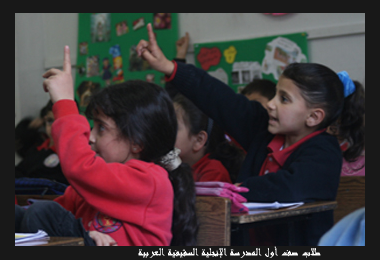
<style>
.page{position:relative;width:380px;height:260px}
.page>*{position:absolute;margin:0}
.t1{font:12px "Andalus";color:#ffffff}
</style>
<div class="page">
<p class="t1" style="left:138px;top:246px;width:183px;height:12px">طلاب صف أول المدرسة الإنجلية السقيفية العربية</p>
</div>
